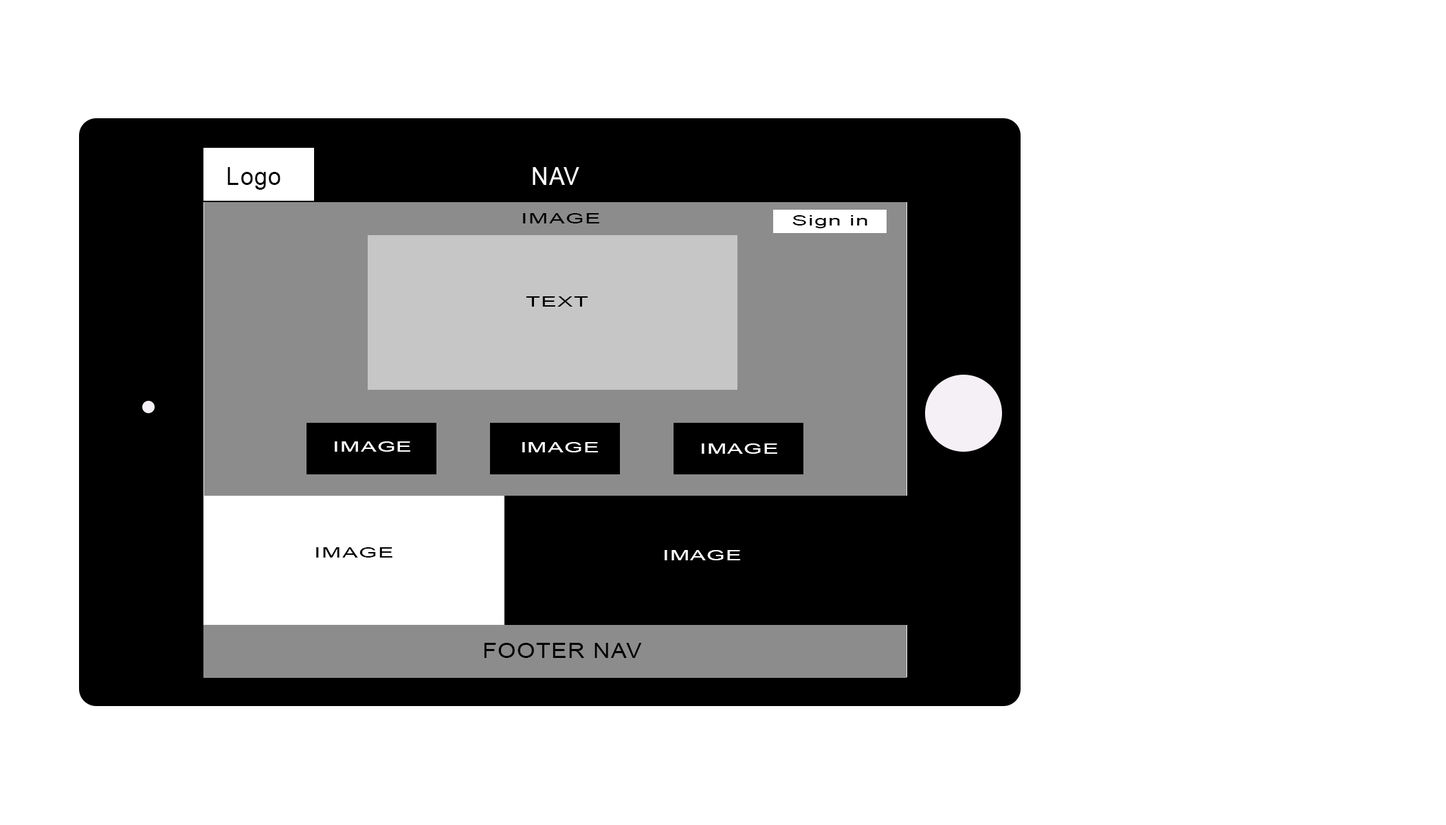
<style>
.page{position:relative;width:1446px;height:825px;background:#ffffff}
.page>*{position:absolute;margin:0}
.t1{font:24.7px "ArialMT";letter-spacing:0.04em;color:#000000;scale:0.95 1}
.t2{font:24.7px "ArialMT";letter-spacing:0.04em;color:#ffffff;scale:0.95 1}
.t3{font:13.9px "ArialMT";letter-spacing:0.04em;color:#000000;scale:1.68 1}
.t4{font:13.9px "ArialMT";letter-spacing:0.04em;color:#ffffff;scale:1.68 1}
.t5{font:21.2px "ArialMT";letter-spacing:0.04em;color:#000000;scale:1.11 1}
</style>
<div class="page">
<p class="t1" style="left:227px;top:167px;width:53px;height:23px">Logo</p>
<p class="t2" style="left:533px;top:167px;width:46px;height:18px">NAV</p>
<p class="t3" style="left:523px;top:213px;width:76px;height:10px">IMAGE</p>
<p class="t3" style="left:792px;top:215px;width:75px;height:13px">Sign in</p>
<p class="t3" style="left:526px;top:296px;width:62px;height:11px">TEXT</p>
<p class="t4" style="left:335px;top:441px;width:75px;height:11px">IMAGE</p>
<p class="t4" style="left:522px;top:442px;width:76px;height:10px">IMAGE</p>
<p class="t4" style="left:702px;top:443px;width:75px;height:11px">IMAGE</p>
<p class="t3" style="left:316px;top:547px;width:76px;height:10px">IMAGE</p>
<p class="t4" style="left:665px;top:550px;width:75px;height:10px">IMAGE</p>
<p class="t5" style="left:484px;top:643px;width:158px;height:15px">FOOTER NAV</p>
</div>
